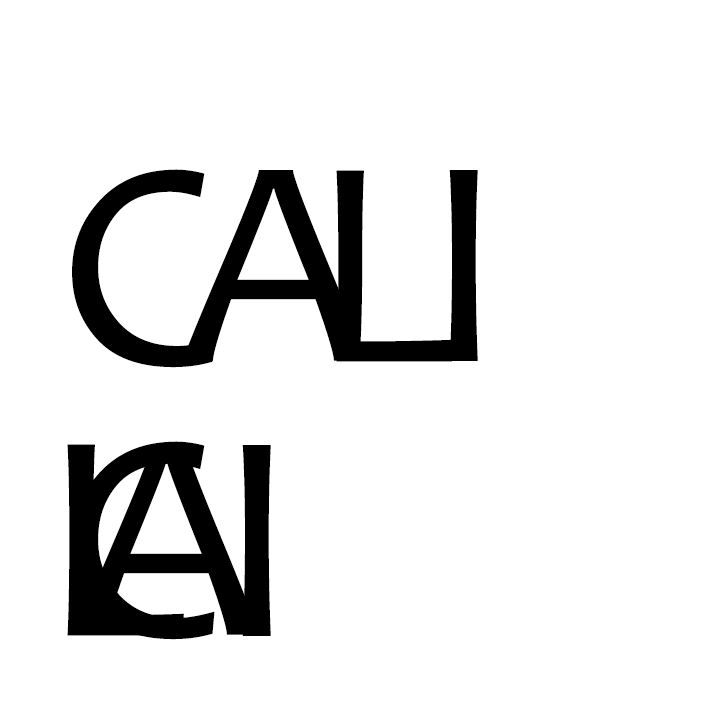
<style>
.page{position:relative;width:720px;height:720px;background:#ffffff}
.page>*{position:absolute;margin:0}
.t1{font:299.9px "Candara";color:#000000}
</style>
<div class="page">
<p class="t1" style="left:72px;top:169px;width:143px;height:199px">C</p>
<p class="t1" style="left:183px;top:170px;width:182px;height:191px">A</p>
<p class="t1" style="left:336px;top:170px;width:117px;height:192px">L</p>
<p class="t1" style="left:449px;top:170px;width:29px;height:191px">I</p>
<p class="t1" style="left:67px;top:444px;width:117px;height:192px">L</p>
<p class="t1" style="left:72px;top:441px;width:143px;height:199px">C</p>
<p class="t1" style="left:76px;top:444px;width:182px;height:191px">A</p>
<p class="t1" style="left:242px;top:445px;width:29px;height:191px">I</p>
</div>
